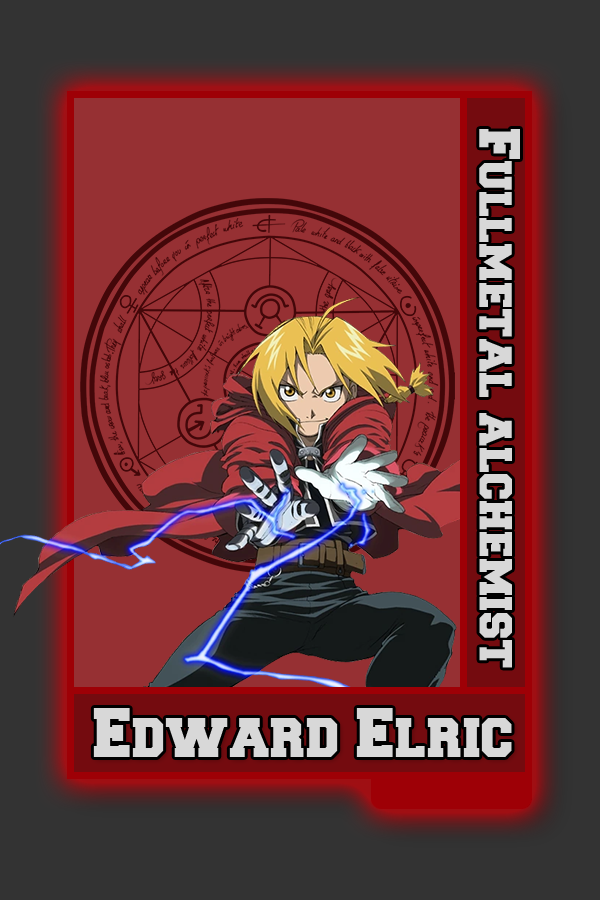
<style>
.page{position:relative;width:600px;height:900px;background:#333333}
.page>*{position:absolute;margin:0}
.t1{font:48.8px "Freshman";color:#d8d8d8}
.t2{font:58.3px "Freshman";color:#d8d8d8}
</style>
<div class="page">
<p class="t1" style="left:479px;top:129px;width:41px;height:539px;rotate:90deg">Fullmetal alchemist</p>
<p class="t2" style="left:93px;top:708px;width:419px;height:49px">Edward Elric</p>
</div>
